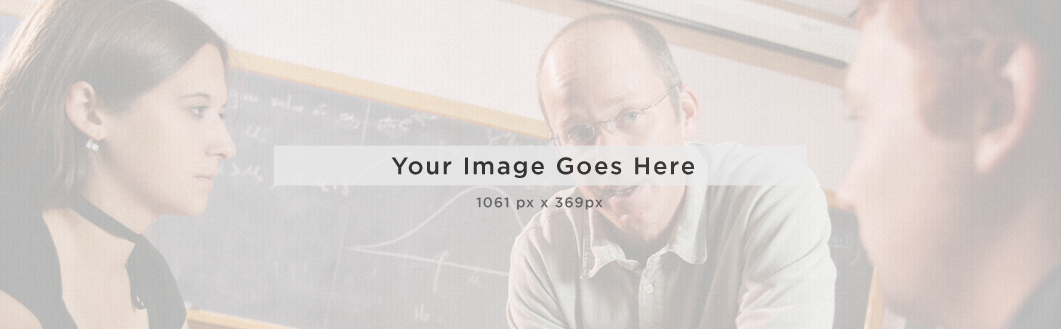
<style>
.page{position:relative;width:1061px;height:329px}
.page>*{position:absolute;margin:0}
.t1{font:24px "GothamHTF-Medium";letter-spacing:0.075em;color:#353535}
.t2{font:14px "GothamHTF-Medium";letter-spacing:0.075em;color:#666666}
</style>
<div class="page">
<p class="t1" style="left:391px;top:157px;width:304px;height:21px">Your Image Goes Here</p>
<p class="t2" style="left:476px;top:197px;width:127px;height:13px">1061 px x 369px</p>
</div>
